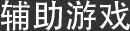
<style>
.page{position:relative;width:130px;height:31px;background:#333333}
.page>*{position:absolute;margin:0}
.t1{font:32.8px "AdobeHeitiStd-Regular";color:#ffffff}
</style>
<div class="page">
<p class="t1" style="left:0px;top:0px;width:130px;height:31px">辅助游戏</p>
</div>
